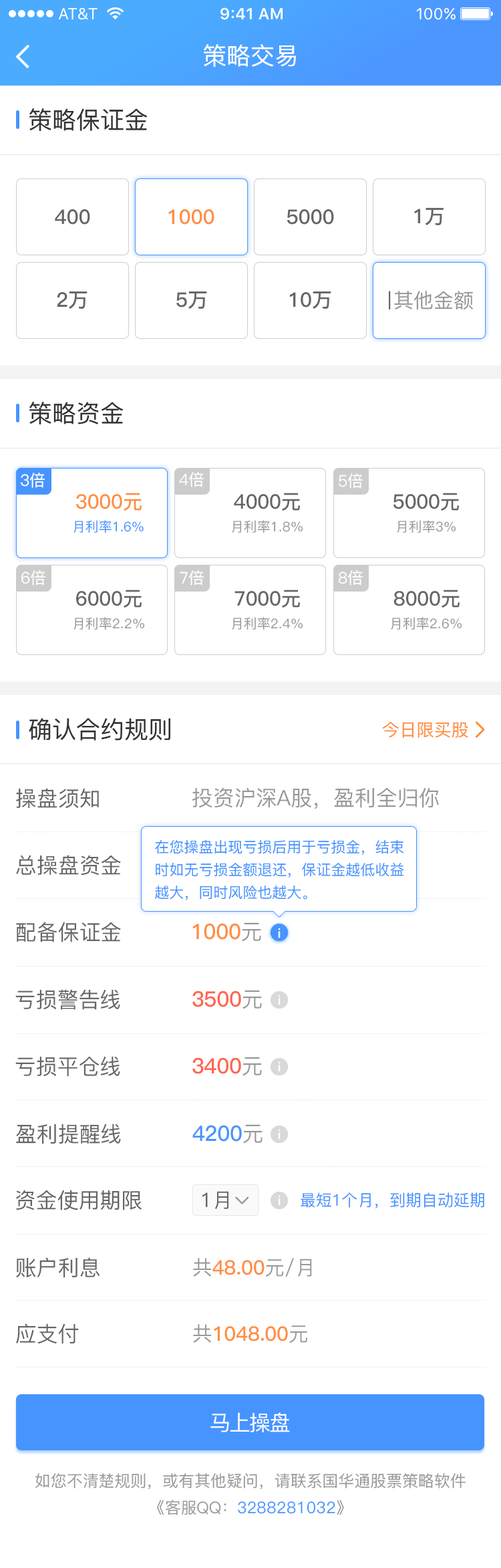
<style>
.page{position:relative;width:501px;height:1568px;background:#ffffff}
.page>*{position:absolute;margin:0}
.t1{font:24.1px "PingFang-SC-Medium";color:#ffffff}
.t2{font:24.1px "PingFang-SC-Medium";color:#333333}
.t3{font:20.1px "PingFang-SC-Bold";color:#666666}
.t4{font:20.1px "PingFang-SC-Bold";color:#ff8e42}
.t5{font:20.1px "PingFang-SC-Medium";color:#666666}
.t6{font:20.1px "PingFang-SC-Medium";color:#999999}
.t7{font:16px "PingFang-SC-Medium";color:#ffffff}
.t8{font:13.4px "PingFang-SC-Medium";color:#4794ff}
.t9{font:13.4px "PingFang-SC-Medium";color:#999999}
.t10{font:17.4px "PingFang-SC-Medium";color:#ff8e42}
.t11{font:21.4px "PingFang-SC-Medium";color:#666666}
.t12{font:21.4px "PingFang-SC-Medium";color:#999999}
.t13{font:14.7px/22.7px "PingFang-SC-Medium";color:#4794ff}
.t14{font:21.4px "PingFang-SC-Bold";color:#ff8e42}
.t15{font:21.4px "PingFang-SC-Bold";color:#ff6552}
.t16{font:21.4px "PingFang-SC-Bold";color:#4794ff}
.t17{font:16px "PingFang-SC-Medium";color:#4794ff}
.t18{font:21.4px "PingFang-SC-Medium";letter-spacing:-0.06em;color:#ffffff}
.t19{font:16px/26.7px "PingFang-SC-Medium";color:#999999}
.t20{font:16px/26.7px "PingFang-SC-Medium";color:#4794ff}
</style>
<div class="page">
<p class="t1" style="left:204px;top:44px;width:92px;height:23px">策略交易</p>
<p class="t2" style="left:29px;top:108px;width:119px;height:23px">策略保证金</p>
<p class="t3" style="left:55px;top:209px;width:35px;height:16px">400</p>
<p class="t4" style="left:168px;top:209px;width:47px;height:16px">1000</p>
<p class="t3" style="left:287px;top:209px;width:47px;height:16px">5000</p>
<p class="t3" style="left:414px;top:208px;width:30px;height:17px">1万</p>
<p class="t3" style="left:57px;top:291px;width:31px;height:18px">2万</p>
<p class="t3" style="left:176px;top:291px;width:31px;height:18px">5万</p>
<p class="t3" style="left:290px;top:291px;width:42px;height:18px">10万</p>
<p class="t5" style="left:389px;top:291px;width:2px;height:18px">丨</p>
<p class="t6" style="left:394px;top:291px;width:79px;height:18px">其他金额</p>
<p class="t2" style="left:29px;top:402px;width:95px;height:22px">策略资金</p>
<p class="t7" style="left:21px;top:473px;width:24px;height:15px">3倍</p>
<p class="t7" style="left:179px;top:472px;width:25px;height:15px">4倍</p>
<p class="t7" style="left:339px;top:473px;width:24px;height:16px">5倍</p>
<p class="t4" style="left:76px;top:493px;width:66px;height:18px">3000元</p>
<p class="t3" style="left:234px;top:493px;width:66px;height:18px">4000元</p>
<p class="t3" style="left:394px;top:493px;width:65px;height:18px">5000元</p>
<p class="t8" style="left:74px;top:520px;width:70px;height:13px">月利率1.6%</p>
<p class="t9" style="left:232px;top:520px;width:71px;height:13px">月利率1.8%</p>
<p class="t9" style="left:397px;top:520px;width:59px;height:13px">月利率3%</p>
<p class="t7" style="left:21px;top:570px;width:24px;height:15px">6倍</p>
<p class="t7" style="left:180px;top:570px;width:24px;height:15px">7倍</p>
<p class="t7" style="left:338px;top:570px;width:25px;height:15px">8倍</p>
<p class="t3" style="left:76px;top:590px;width:66px;height:18px">6000元</p>
<p class="t3" style="left:235px;top:590px;width:65px;height:18px">7000元</p>
<p class="t3" style="left:394px;top:590px;width:66px;height:18px">8000元</p>
<p class="t9" style="left:74px;top:617px;width:71px;height:13px">月利率2.2%</p>
<p class="t9" style="left:232px;top:617px;width:71px;height:13px">月利率2.4%</p>
<p class="t9" style="left:391px;top:617px;width:72px;height:13px">月利率2.6%</p>
<p class="t2" style="left:29px;top:718px;width:141px;height:23px">确认合约规则</p>
<p class="t10" style="left:382px;top:722px;width:87px;height:16px">今日限买股</p>
<p class="t11" style="left:16px;top:788px;width:83px;height:21px">操盘须知</p>
<p class="t12" style="left:192px;top:787px;width:247px;height:22px">投资沪深A股，盈利全归你</p>
<p class="t13" style="left:155px;top:839px;width:249px;height:61px">在您操盘出现亏损后用于亏损金，结束时如无亏损金额退还，保证金越低收益越大，同时风险也越大。</p>
<p class="t11" style="left:16px;top:855px;width:105px;height:21px">总操盘资金</p>
<p class="t11" style="left:16px;top:922px;width:105px;height:20px">配备保证金</p>
<p class="t14" style="left:193px;top:922px;width:68px;height:20px">1000<span class="t12">元</span></p>
<p class="t11" style="left:15px;top:989px;width:105px;height:21px">亏损警告线</p>
<p class="t15" style="left:192px;top:990px;width:70px;height:19px">3500<span class="t12">元</span></p>
<p class="t11" style="left:15px;top:1056px;width:105px;height:21px">亏损平仓线</p>
<p class="t15" style="left:192px;top:1057px;width:70px;height:19px">3400<span class="t12">元</span></p>
<p class="t11" style="left:16px;top:1124px;width:105px;height:20px">盈利提醒线</p>
<p class="t16" style="left:192px;top:1124px;width:71px;height:20px">4200<span class="t12">元</span></p>
<p class="t11" style="left:16px;top:1190px;width:126px;height:20px">资金使用期限</p>
<p class="t5" style="left:203px;top:1191px;width:26px;height:18px">1月</p>
<p class="t17" style="left:301px;top:1192px;width:184px;height:16px">最短1个月，到期自动延期</p>
<p class="t11" style="left:16px;top:1257px;width:84px;height:21px">账户利息</p>
<p class="t4" style="left:193px;top:1258px;width:119px;height:19px"><span class="t6">共</span>48.00<span class="t6">元/月</span></p>
<p class="t11" style="left:16px;top:1323px;width:63px;height:21px">应支付</p>
<p class="t4" style="left:193px;top:1324px;width:115px;height:19px"><span class="t6">共</span>1048.00<span class="t6">元</span></p>
<p class="t18" style="left:211px;top:1412px;width:79px;height:20px">马上操盘</p>
<p class="t19" style="left:35px;top:1473px;width:431px;height:42px;text-align:center">如您不清楚规则，或有其他疑问，请联系国华通股票策略软件<br>《客服QQ：<span class="t20">3288281032</span>》</p>
</div>
